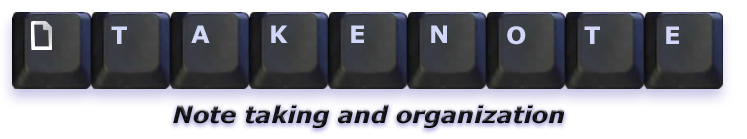
<style>
.page{position:relative;width:747px;height:139px;background:#ffffff}
.page>*{position:absolute;margin:0}
.t1{font:24px "Verdana-Bold";color:#d3d7f7}
.t2{font:24px "Verdana-BoldItalic";color:#131316}
</style>
<div class="page">
<p class="t1" style="left:111px;top:26px;width:16px;height:18px">T</p>
<p class="t1" style="left:191px;top:25px;width:19px;height:18px">A</p>
<p class="t1" style="left:271px;top:25px;width:17px;height:18px">K</p>
<p class="t1" style="left:351px;top:25px;width:13px;height:18px">E</p>
<p class="t1" style="left:431px;top:25px;width:16px;height:18px">N</p>
<p class="t1" style="left:507px;top:26px;width:19px;height:19px">O</p>
<p class="t1" style="left:584px;top:26px;width:16px;height:18px">T</p>
<p class="t1" style="left:666px;top:26px;width:13px;height:18px">E</p>
<p class="t2" style="left:173px;top:104px;width:391px;height:24px">Note taking and organization</p>
</div>
